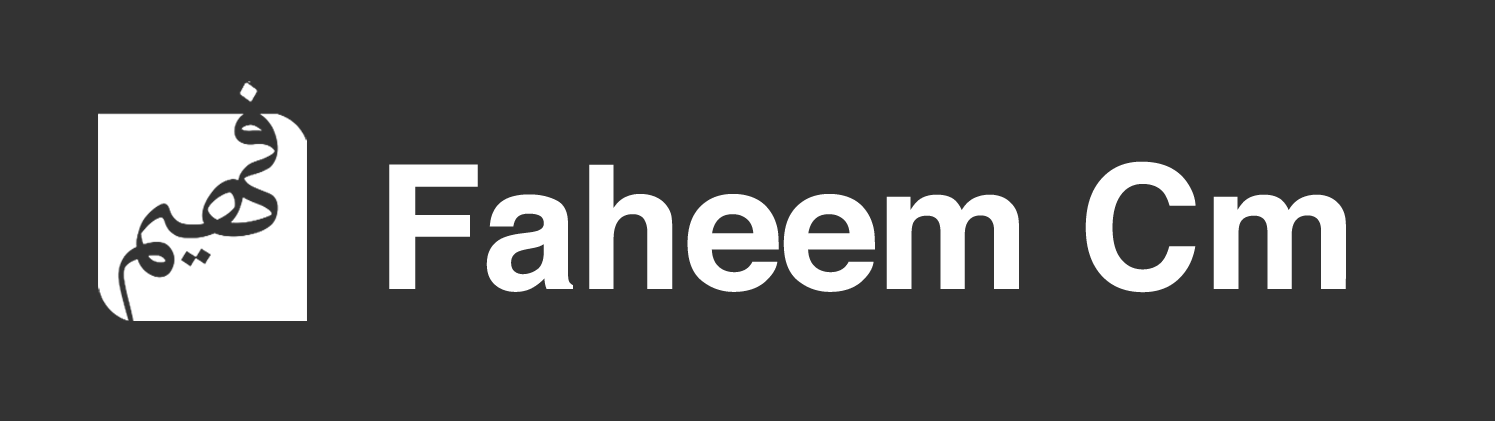
<style>
.page{position:relative;width:1495px;height:421px;background:#333333}
.page>*{position:absolute;margin:0}
.t1{font:173px "Helvetica-Bold";color:#ffffff}
</style>
<div class="page">
<p class="t1" style="left:389px;top:161px;width:957px;height:132px">Faheem Cm</p>
</div>
